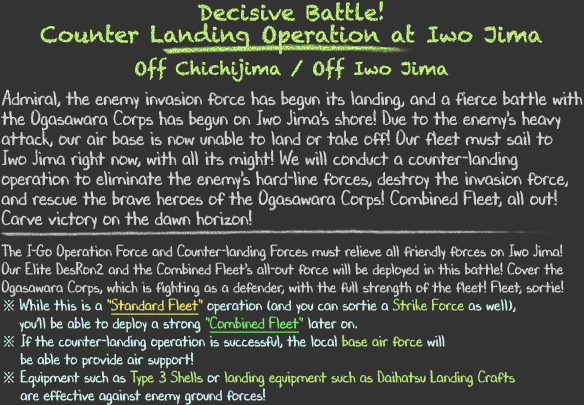
<style>
.page{position:relative;width:584px;height:405px;background:#333333}
.page>*{position:absolute;margin:0}
.t1{font:22px/36px "Chalkduster";color:#bded78}
.t2{font:22px/22px "Chalkduster";color:#bded78}
.t3{font:18px/36px "Chalkduster";color:#bded78}
.t4{font:20px/20px "DJBChalkItUp";color:#d9ded6;scale:0.9 1}
.t5{font:20px/15px "DJBChalkItUp";color:#d9ded6;scale:0.9 1}
.t6{font:16px/18px "DJBChalkItUp";color:#d9ded6;scale:0.9 1}
.t7{font:16px/18px "TimesNewRomanPSMT";color:#d7feff;scale:0.9 1}
.t8{font:16px/18px "DJBChalkItUp";color:#d7feff;scale:0.9 1}
.t9{font:16px/18px "DJBChalkItUp";color:#f5ed68;scale:0.9 1}
.t10{font:16px/18px "DJBChalkItUp";color:#f5ed68;text-decoration:underline;scale:0.9 1}
.t11{font:16px/18px "DJBChalkItUp";color:#bdef78;scale:0.9 1}
.t12{font:16px/18px "DJBChalkItUp";color:#7bf26b;scale:0.9 1}
.t13{font:16px/18px "DJBChalkItUp";color:#7bf26b;text-decoration:underline;scale:0.9 1}
</style>
<div class="page">
<p class="t1" style="left:40px;top:1px;width:503px;height:81px;text-align:center"><span class="t2">Decisive Battle!<br></span>Counter Landing Operation at Iwo Jima<br><span class="t3">Off Chichijima / Off Iwo Jima</span></p>
<p class="t4" style="left:1px;top:89px;width:582px;height:316px">Admiral, the enemy invasion force has begun its landing, and a fierce battle with<br>the Ogasawara Corps has begun on Iwo Jima's shore! Due to the enemy's heavy<br>attack, our air base is now unable to land or take off! Our fleet must sail to<br>Iwo Jima right now, with all its might! We will conduct a counter-landing<br>operation to eliminate the enemy's hard-line forces, destroy the invasion force,<br>and rescue the brave heroes of the Ogasawara Corps! Combined Fleet, all out!<br><span class="t5">Carve victory on the dawn horizon!<br><br></span><span class="t6">The I-Go Operation Force and Counter-landing Forces must relieve all friendly forces on Iwo Jima!<br>Our Elite DesRon2 and the Combined Fleet's all-out force will be deployed in this battle! Cover the<br>Ogasawara Corps, which is fighting as a defender, with the full strength of the fleet! Fleet, sortie!<br></span><span class="t7">※ </span><span class="t8">While this is a </span><span class="t9">"</span><span class="t10">Standard Fleet</span><span class="t9">"</span><span class="t8"> operation (and you can sortie a </span><span class="t11">Strike Force</span><span class="t8"> as well),<br>　 you’ll be able to deploy a strong </span><span class="t12">"</span><span class="t13">Combined Fleet</span><span class="t12">" </span><span class="t8">later on.<br></span><span class="t7">※</span><span class="t8"> If the counter-landing operation is successful, the local </span><span class="t11">base air force</span><span class="t8"> will<br>　 be able to provide air support!<br></span><span class="t7">※</span><span class="t8"> Equipment such as </span><span class="t11">Type 3 Shells</span><span class="t8"> or </span><span class="t11">landing equipment such as Daihatsu Landing Crafts<br>　</span><span class="t8"> are effective against enemy ground forces!</span></p>
</div>
